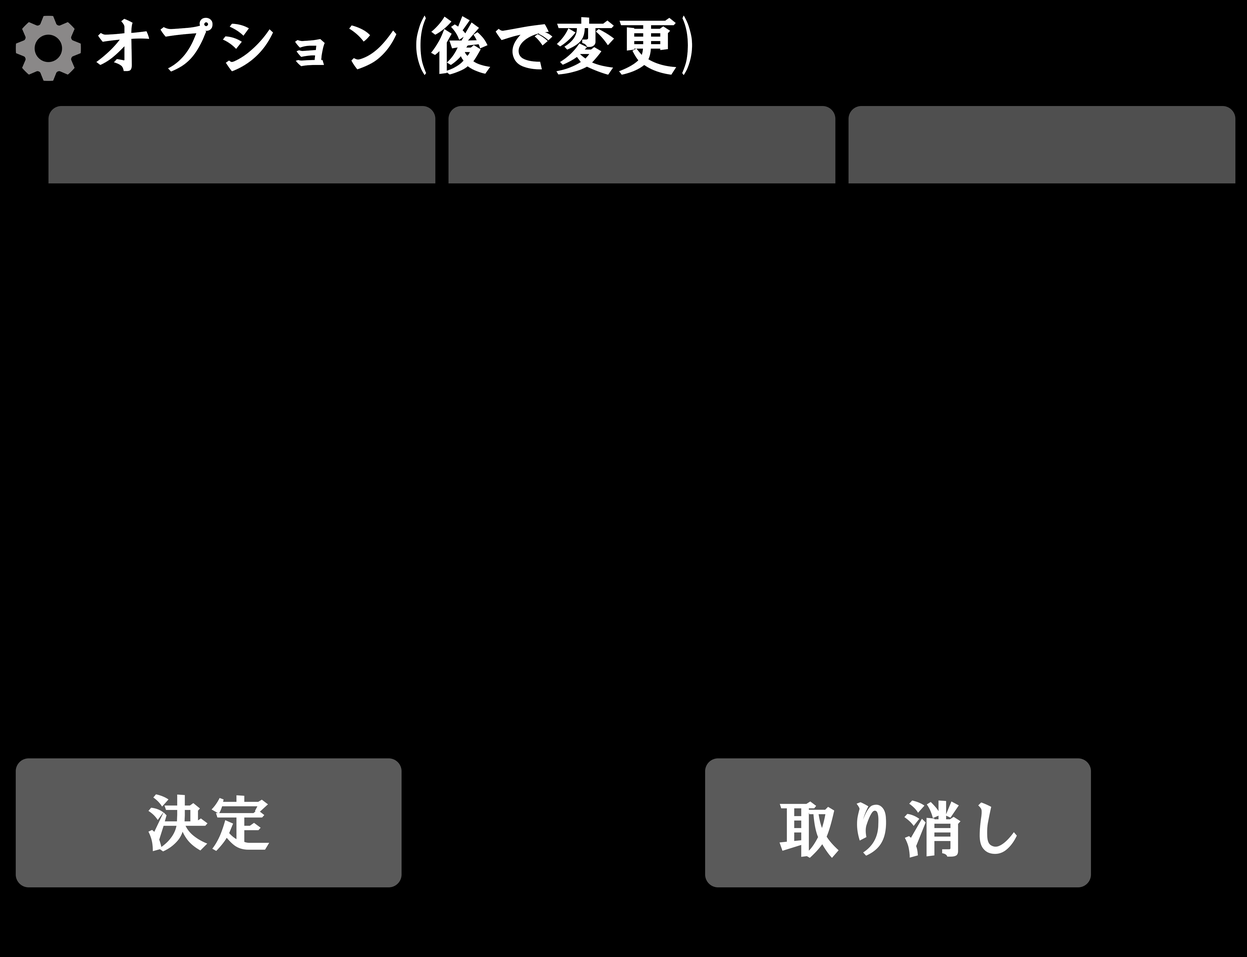
<style>
.page{position:relative;width:1247px;height:957px;background:#000000}
.page>*{position:absolute;margin:0}
.t1{font:62.4px "HGSSoeiPresenceEB";color:#ffffff}
</style>
<div class="page">
<p class="t1" style="left:96px;top:15px;width:596px;height:60px">オプション(後で変更)</p>
<p class="t1" style="left:148px;top:794px;width:121px;height:57px">決定</p>
<p class="t1" style="left:779px;top:800px;width:238px;height:58px">取り消し</p>
</div>
